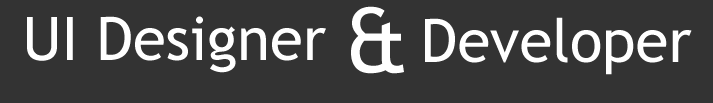
<style>
.page{position:relative;width:713px;height:103px;background:#333333}
.page>*{position:absolute;margin:0}
.t1{font:90px "TrebuchetMS";color:#ffffff}
.t2{font:60px "TrebuchetMS";color:#ffffff}
</style>
<div class="page">
<p class="t1" style="left:351px;top:6px;width:53px;height:68px">&amp;</p>
<p class="t2" style="left:27px;top:16px;width:299px;height:57px">UI Designer</p>
<p class="t2" style="left:425px;top:17px;width:267px;height:58px">Developer</p>
</div>
